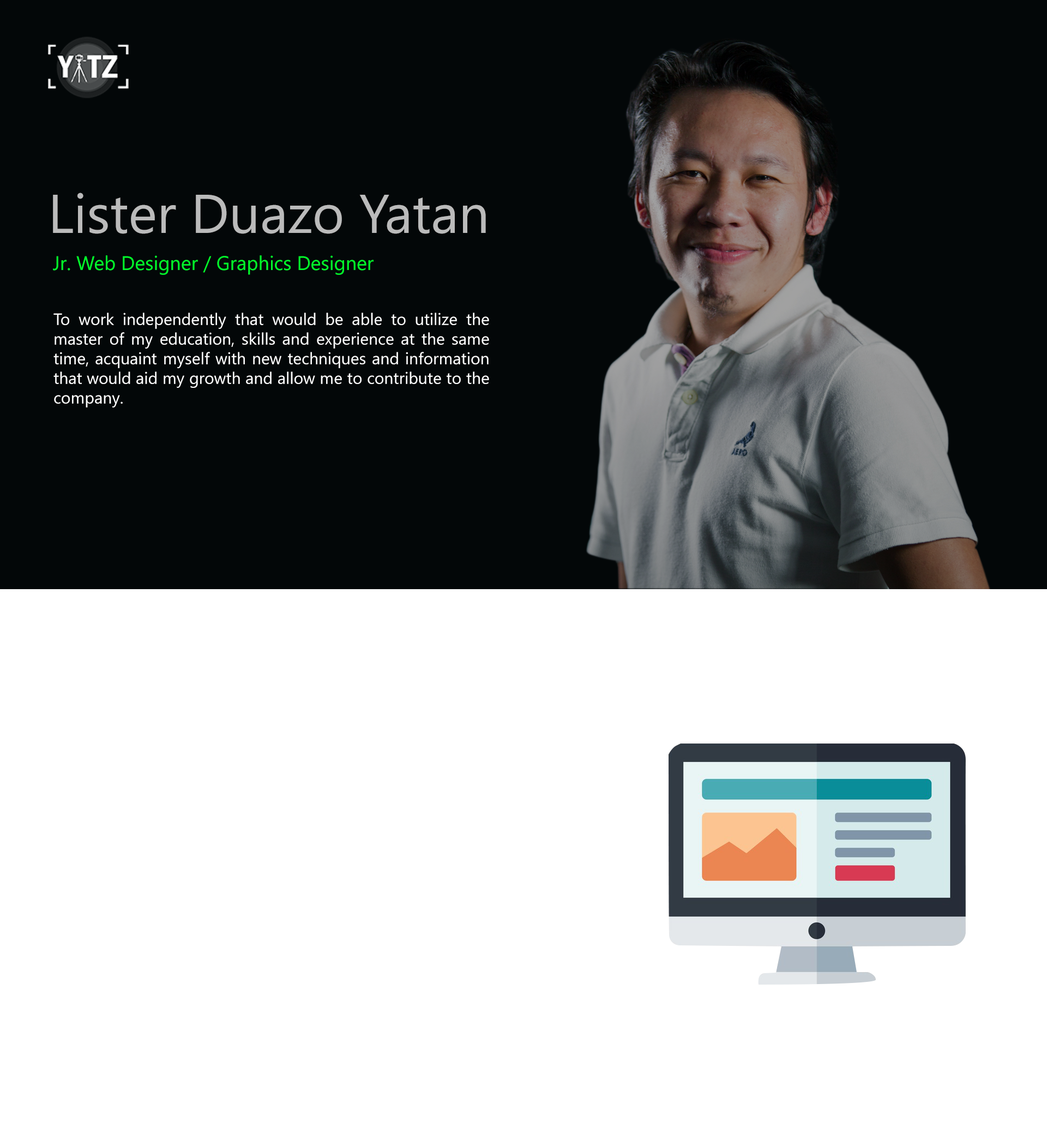
<style>
.page{position:relative;width:1047px;height:1139px;background:#ffffff}
.page>*{position:absolute;margin:0}
.t1{font:54.5px "SegoeUI";color:#bbbbbb}
.t2{font:19.6px "SegoeUI";color:#02fb2b}
.t3{font:16.4px "SegoeUI";color:#ffffff}
</style>
<div class="page">
<p class="t1" style="left:53px;top:193px;width:433px;height:41px">Lister Duazo Yatan</p>
<p class="t2" style="left:53px;top:255px;width:321px;height:20px">Jr. Web Designer / Graphics Designer</p>
<p class="t3" style="left:53px;top:313px;width:436px;height:94px;text-align:justify">To work independently that would be able to utilize the master of my education, skills and experience at the same time, acquaint myself with new techniques and information that would aid my growth and allow me to contribute to the company.</p>
</div>
